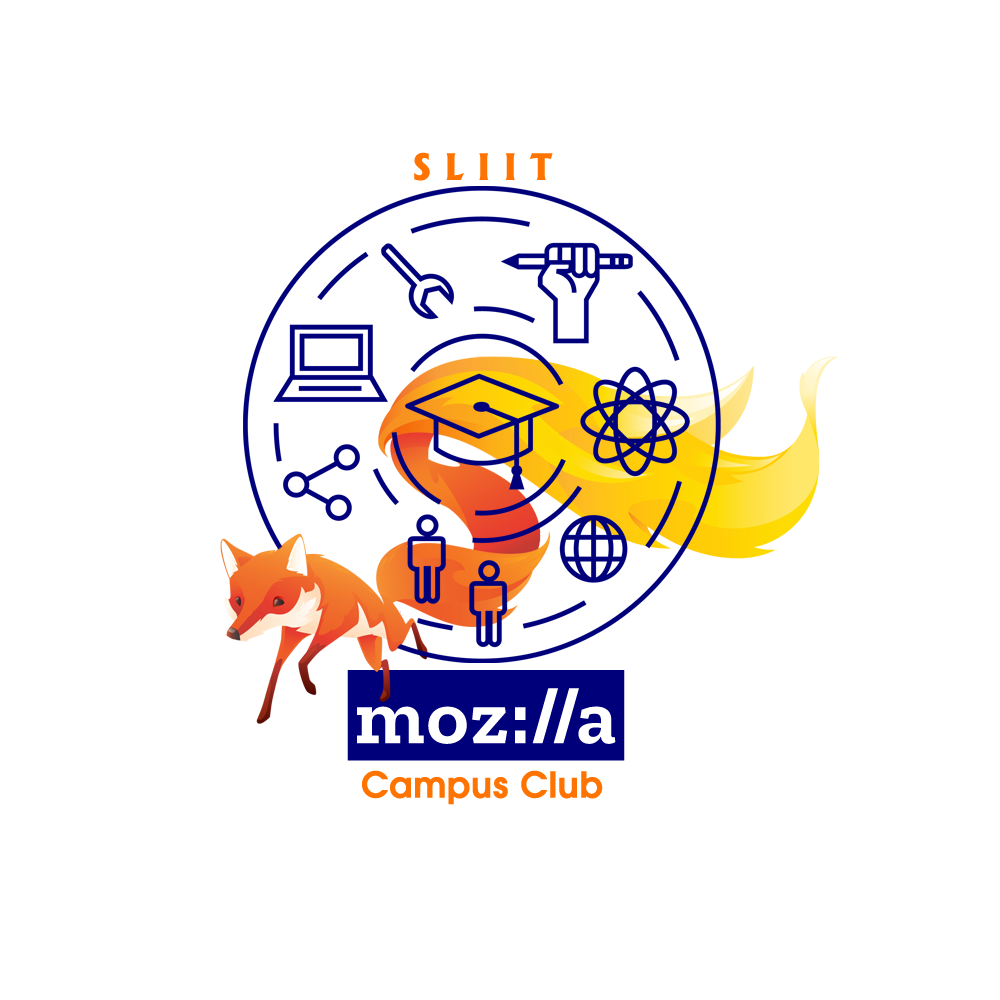
<style>
.page{position:relative;width:1000px;height:1000px;background:#ffffff}
.page>*{position:absolute;margin:0}
.t1{font:35px "Albertus-ExtraBold";color:#ff7300}
.t2{font:80px "ZillaSlabHighlight-Bold";color:#00007b}
.t3{font:35px "AvantGarde-Demi";color:#ff7300;font-weight:bold}
</style>
<div class="page">
<p class="t1" style="left:414px;top:152px;width:139px;height:29px">S L I I T</p>
<p class="t2" style="left:347px;top:670px;width:278px;height:91px">moz://a</p>
<p class="t3" style="left:362px;top:770px;width:241px;height:35px">Campus Club</p>
</div>
